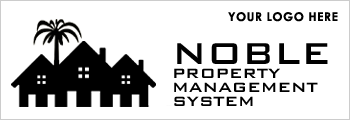
<style>
.page{position:relative;width:350px;height:120px;background:#ffffff}
.page>*{position:absolute;margin:0}
.t1{font:18px/14px "BankGothicBT-Medium";color:#000000}
.t2{font:40px/14px "BankGothicBT-Medium";color:#000000}
</style>
<div class="page">
<p class="t1" style="left:174px;top:43px;width:154px;height:63px"><span class="t2">NOBLE<br></span>PROPERTY<br>MANAGEMENT<br>SYSTEM</p>
</div>
